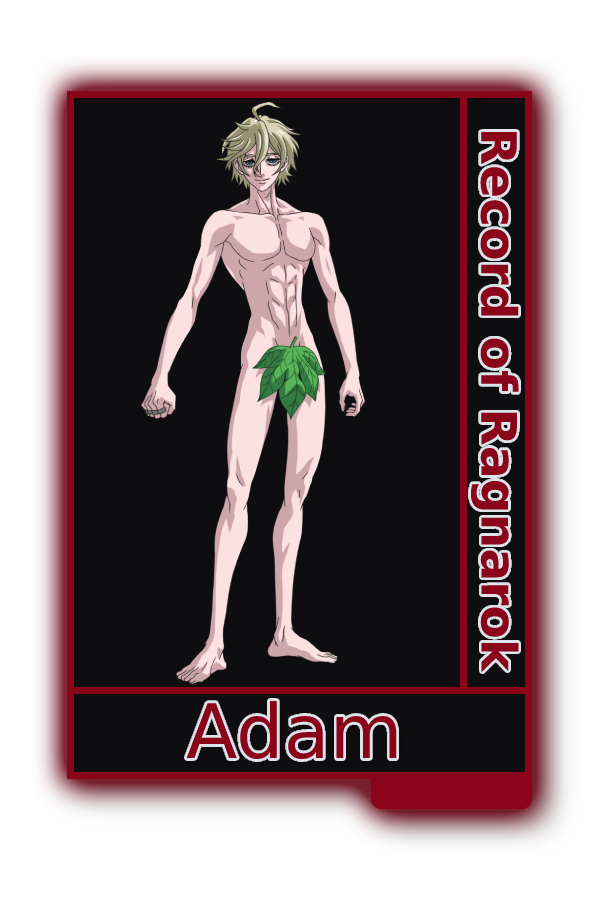
<style>
.page{position:relative;width:600px;height:900px;background:#0e0e10}
.page>*{position:absolute;margin:0}
.t1{font:48.8px "MADETOMMY-Bold";color:#8a051a}
.t2{font:75px "CoolveticaRg-Regular";color:#8a051a}
</style>
<div class="page">
<p class="t1" style="left:470px;top:131px;width:49px;height:542px;rotate:90deg">Record of Ragnarok</p>
<p class="t2" style="left:186px;top:701px;width:211px;height:59px">Adam</p>
</div>
